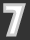
<style>
.page{position:relative;width:30px;height:40px;background:#333333}
.page>*{position:absolute;margin:0}
.t1{font:50px "Bauhaus93";letter-spacing:0.2em}
</style>
<div class="page">
<p class="t1" style="left:3px;top:3px;width:23px;height:34px">7</p>
</div>
